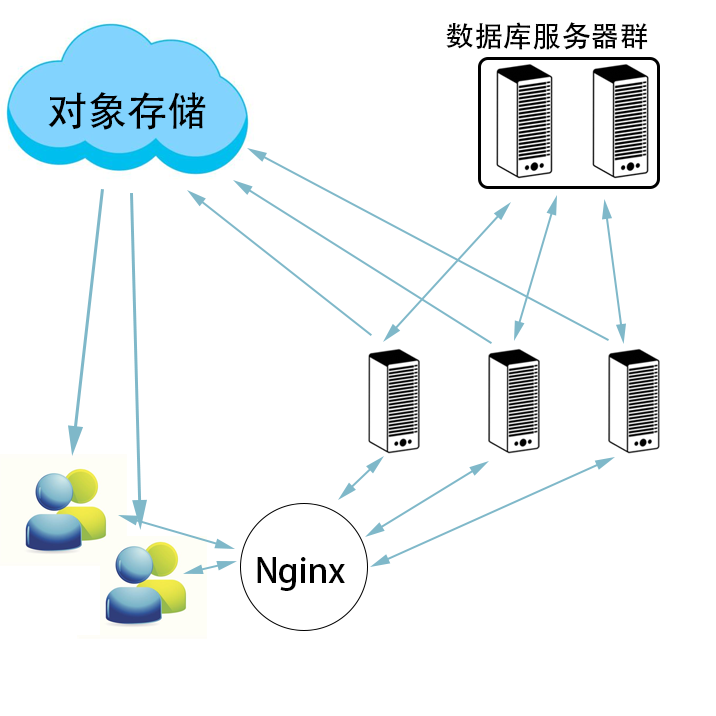
<style>
.page{position:relative;width:716px;height:716px;background:#ffffff}
.page>*{position:absolute;margin:0}
.t1{font:29.1px "AdobeHeitiStd-Regular";color:#000000}
.t2{font:40.2px "AdobeHeitiStd-Regular";color:#000000}
.t3{font:33.5px "AdobeHeitiStd-Regular";color:#000000}
</style>
<div class="page">
<p class="t1" style="left:446px;top:22px;width:202px;height:28px">数据库服务器群</p>
<p class="t2" style="left:48px;top:92px;width:158px;height:38px">对象存储</p>
<p class="t3" style="left:257px;top:557px;width:88px;height:34px">Nginx</p>
</div>
